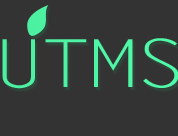
<style>
.page{position:relative;width:178px;height:136px;background:#333333}
.page>*{position:absolute;margin:0}
.t1{font:66.7px "LetterGothic-Normal";letter-spacing:-0.06em;color:#4ef5a5;scale:1.31 1}
</style>
<div class="page">
<p class="t1" style="left:2px;top:38px;width:177px;height:51px">UTMS</p>
</div>
